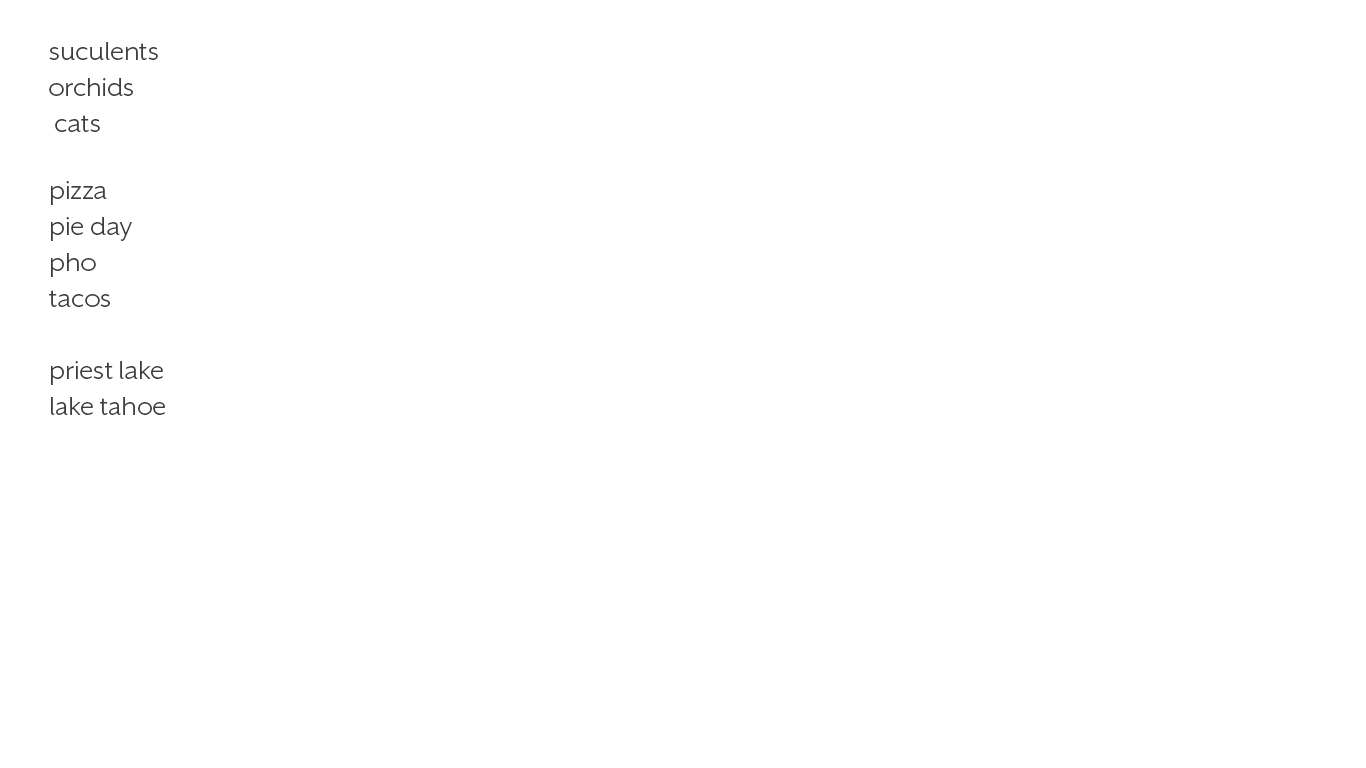
<style>
.page{position:relative;width:1366px;height:768px;background:#ffffff}
.page>*{position:absolute;margin:0}
.t1{font:30px "MrEavesXLSanOT-Book";color:#3d3d3d}
</style>
<div class="page">
<p class="t1" style="left:49px;top:42px;width:109px;height:90px">suculents <br>orchids<br> cats</p>
<p class="t1" style="left:49px;top:181px;width:83px;height:126px">pizza <br>pie day <br>pho <br>tacos</p>
<p class="t1" style="left:51px;top:361px;width:114px;height:54px">priest lake <br>lake tahoe</p>
</div>
